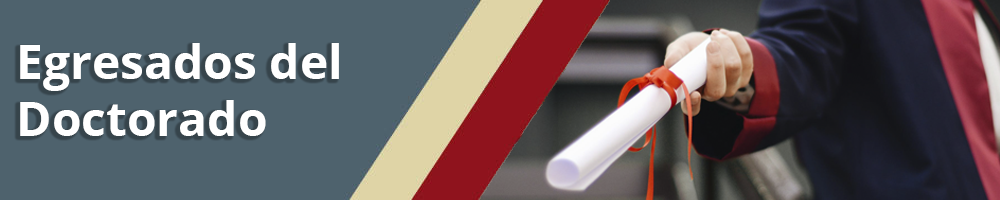
<style>
.page{position:relative;width:1000px;height:200px;background:#4e626d}
.page>*{position:absolute;margin:0}
.t1{font:48px "OpenSans-Bold";color:#ffffff}
</style>
<div class="page">
<p class="t1" style="left:20px;top:43px;width:319px;height:93px">Egresados del Doctorado</p>
</div>
